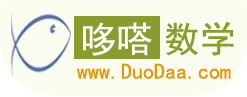
<style>
.page{position:relative;width:247px;height:97px;background:#f9fcee}
.page>*{position:absolute;margin:0}
.t1{font:36px "SimHei";color:#ffffff}
.t2{font:36px "SimHei";color:#8a9c2e}
.t3{font:22px "SimHei";color:#e39808}
</style>
<div class="page">
<p class="t1" style="left:83px;top:22px;width:69px;height:34px">哆嗒</p>
<p class="t2" style="left:165px;top:21px;width:69px;height:35px">数学</p>
<p class="t3" style="left:77px;top:63px;width:154px;height:16px">www.DuoDaa.com</p>
</div>
